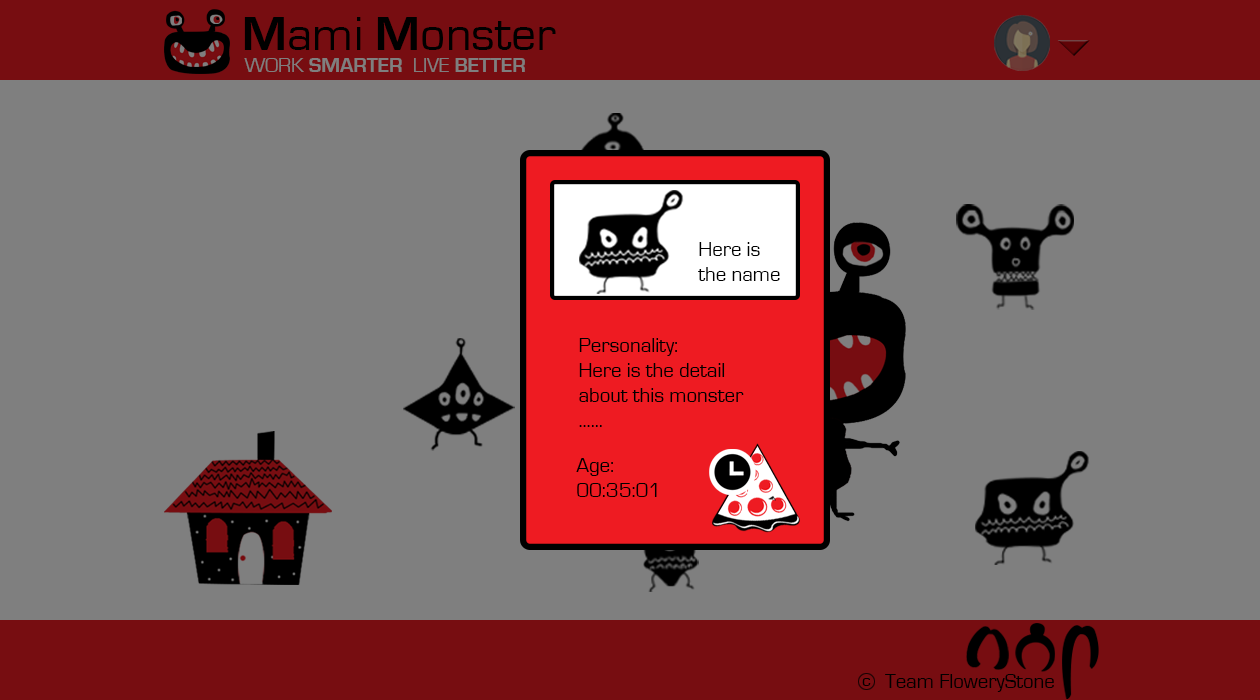
<style>
.page{position:relative;width:1260px;height:700px;background:#7f7f7f}
.page>*{position:absolute;margin:0}
.t1{font:50px "EurostileRegular";color:#000000}
.t2{font:50px "EurostileBold";color:#000000}
.t3{font:20.8px "EurostileBold";color:#7f7f7f}
.t4{font:20.8px "EurostileRegular";color:#7f7f7f}
.t5{font:20.8px/25px "EurostileRegular";color:#000000}
.t6{font:17.7px "EurostileRegular";color:#000000}
.t7{font:20.8px "EurostileRegular";color:#000000}
</style>
<div class="page">
<p class="t1" style="left:244px;top:17px;width:312px;height:33px"><span class="t2">M</span>ami <span class="t2">M</span>onster</p>
<p class="t3" style="left:244px;top:58px;width:281px;height:14px"><span class="t4">WORK </span>SMARTER<span class="t4">  LIVE </span>BETTER</p>
<p class="t5" style="left:698px;top:242px;width:82px;height:39px">Here is <br>the name</p>
<p class="t5" style="left:579px;top:338px;width:165px;height:89px">Personality:<br>Here is the detail <br>about this monster<br>......</p>
<p class="t5" style="left:576px;top:458px;width:81px;height:39px">Age: <br>00:35:01</p>
<p class="t6" style="left:862px;top:678px;width:9px;height:8px">c</p>
<p class="t7" style="left:885px;top:674px;width:169px;height:18px">Team FloweryStone</p>
</div>
